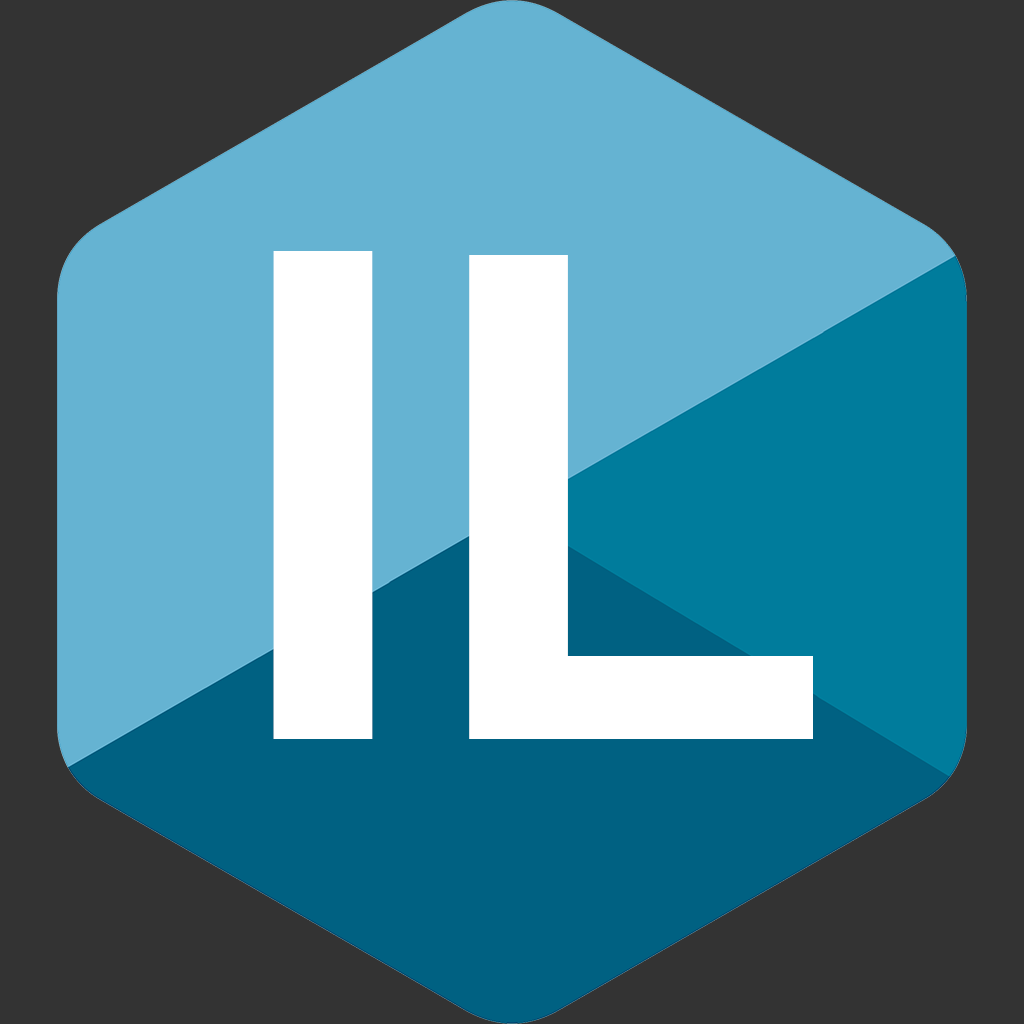
<style>
.page{position:relative;width:1024px;height:1024px;background:#333333}
.page>*{position:absolute;margin:0}
.t1{font:682.1px "Arial-BoldMT";color:#ffffff}
</style>
<div class="page">
<p class="t1" style="left:273px;top:251px;width:540px;height:488px">IL</p>
</div>
